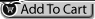
<style>
.page{position:relative;width:95px;height:19px}
.page>*{position:absolute;margin:0}
.t1{font:14px "MyriadPro-Regular";letter-spacing:-0.008em;color:#000000}
</style>
<div class="page">
<p class="t1" style="left:20px;top:3px;width:67px;height:11px">Add To Cart</p>
</div>
